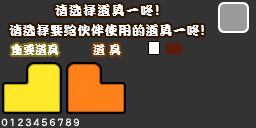
<style>
.page{position:relative;width:256px;height:128px;background:#333333}
.page>*{position:absolute;margin:0}
.t1{font:13px "DFPKanTingLiuW9";letter-spacing:0.1em;color:#ffffff}
.t2{font:15px "DFPKanTingLiuW9";letter-spacing:0.1em;color:#ffffff}
.t3{font:13px "DFPKanTingLiuW9";letter-spacing:0.05em;color:#ffffff}
.t4{font:15px "DFPKanTingLiuW9";letter-spacing:0.05em;color:#ffffff}
.t5{font:12px "DFPKanTingLiuW9";color:#ffffff}
</style>
<div class="page">
<p class="t1" style="left:55px;top:4px;width:104px;height:12px">请选择道具一咚<span class="t2">!</span></p>
<p class="t3" style="left:9px;top:24px;width:195px;height:12px">请选择要给伙伴使用的道具一咚<span class="t4">!</span></p>
<p class="t5" style="left:11px;top:44px;width:48px;height:11px">重要道具</p>
<p class="t5" style="left:93px;top:44px;width:28px;height:11px">道 具</p>
</div>
